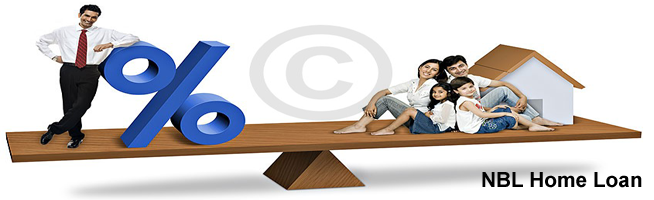
<style>
.page{position:relative;width:654px;height:200px;background:#ffffff}
.page>*{position:absolute;margin:0}
.t1{font:20.8px "Arial-BoldMT";color:#010101}
</style>
<div class="page">
<p class="t1" style="left:482px;top:172px;width:160px;height:16px">NBL Home Loan</p>
</div>
